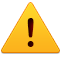
<style>
.page{position:relative;width:61px;height:57px;background:#ffffff}
.page>*{position:absolute;margin:0}
.t1{font:39.9px "ArialRoundedMTBold";letter-spacing:0.18em;color:#380000}
</style>
<div class="page">
<p class="t1" style="left:27px;top:18px;width:7px;height:29px">!</p>
</div>
